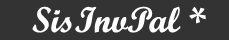
<style>
.page{position:relative;width:229px;height:40px;background:#333333}
.page>*{position:absolute;margin:0}
.t1{font:36px "ScriptMTBold";color:#fefefe}
</style>
<div class="page">
<p class="t1" style="left:32px;top:6px;width:174px;height:27px">SisInvPal *</p>
</div>
